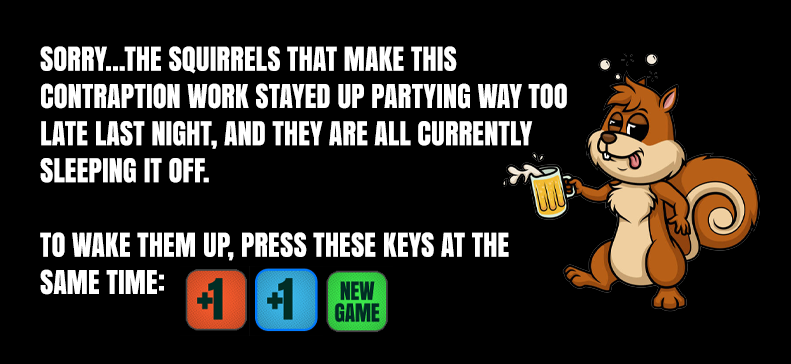
<style>
.page{position:relative;width:791px;height:364px;background:#000000}
.page>*{position:absolute;margin:0}
.t1{font:31px "Anton";color:#ffffff;text-transform:uppercase;scale:0.92 1}
</style>
<div class="page">
<p class="t1" style="left:40px;top:46px;width:527px;height:249px">Sorry…the squirrels that make this contraption work stayed up partying way too late last night, and they are all currently sleeping it off.<br><br>To wake them up, press these keys at the same time:</p>
</div>
